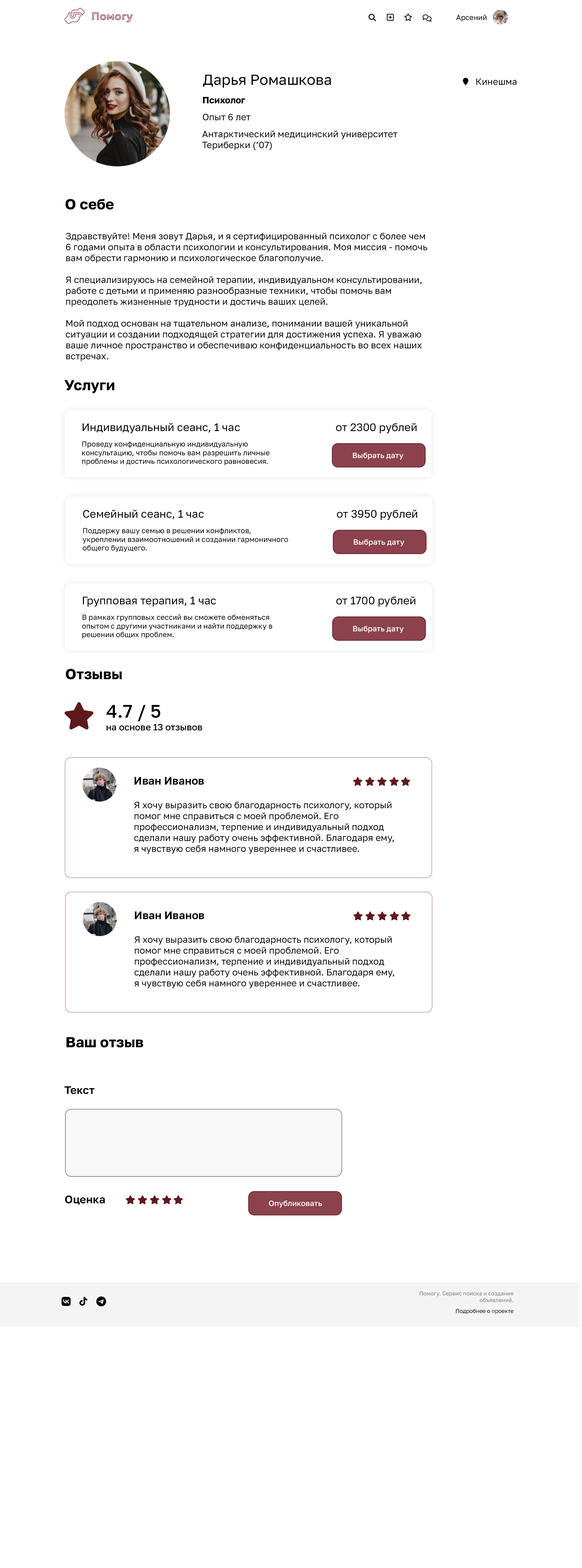
<style>
.page{position:relative;width:582px;height:1568px;background:#ffffff}
.page>*{position:absolute;margin:0}
.t1{font:10.9px "Geologica-Bold"}
.t2{font:7.3px "GolosText-Regular";color:#000000}
.t3{font:14.5px "GolosText-Regular";color:#000000}
.t4{font:9.1px "GolosText-Regular";color:#000000}
.t5{font:9.1px "GolosText-Bold";color:#000000}
.t6{font:14.5px "GolosText-Bold";color:#000000}
.t7{font:10.9px "GolosText-Regular";color:#000000}
.t8{font:7.6px "GolosText-Medium";color:#ffffff}
.t9{font:18.2px "GolosText-Medium";color:#000000}
.t10{font:9.1px "GolosText-Medium";color:#000000}
.t11{font:10.9px "GolosText-SemiBold";color:#000000}
.t12{font:5.5px "GolosText-Regular";color:#7c7c7c}
.t13{font:5.5px "GolosText-Regular";color:#000000}
</style>
<div class="page">
<p class="t1" style="left:92px;top:12px;width:41px;height:11px">Помогу</p>
<p class="t2" style="left:456px;top:15px;width:30px;height:7px">Арсений</p>
<p class="t3" style="left:203px;top:75px;width:128px;height:13px">Дарья Ромашкова</p>
<p class="t4" style="left:476px;top:78px;width:40px;height:7px">Кинешма</p>
<p class="t5" style="left:203px;top:97px;width:42px;height:7px">Психолог</p>
<p class="t4" style="left:203px;top:114px;width:47px;height:7px">Опыт 6 лет</p>
<p class="t4" style="left:202px;top:131px;width:195px;height:19px">Антарктический медицинский университет<br>Териберки (’07)</p>
<p class="t6" style="left:65px;top:199px;width:49px;height:11px">О себе</p>
<p class="t4" style="left:66px;top:233px;width:361px;height:128px">Здравствуйте! Меня зовут Дарья, и я сертифицированный психолог с более чем 6 годами опыта в области психологии и консультирования. Моя миссия - помочь вам обрести гармонию и психологическое благополучие.<br><br>Я специализируюсь на семейной терапии, индивидуальном консультировании, работе с детьми и применяю разнообразные техники, чтобы помочь вам преодолеть жизненные трудности и достичь ваших целей.<br><br>Мой подход основан на тщательном анализе, понимании вашей уникальной ситуации и создании подходящей стратегии для достижения успеха. Я уважаю ваше личное пространство и обеспечиваю конфиденциальность во всех наших встречах.<br><br>С моей помощью вы сможете развиваться, решать проблемы и строить более счастливую жизнь. Я горжусь своей работой и готов вам помочь. Не стесняйтесь связаться со мной для записи на консультацию и начала пути к лучшей версии себя.</p>
<p class="t6" style="left:64px;top:380px;width:50px;height:14px">Услуги</p>
<p class="t7" style="left:82px;top:423px;width:158px;height:11px">Индивидуальный сеанс, 1 час</p>
<p class="t7" style="left:336px;top:423px;width:80px;height:11px">от 2300 рублей</p>
<p class="t2" style="left:82px;top:441px;width:187px;height:24px">Проведу конфиденциальную индивидуальную консультацию, чтобы помочь вам разрешить личные проблемы и достичь психологического равновесия.</p>
<p class="t8" style="left:353px;top:452px;width:50px;height:8px">Выбрать дату</p>
<p class="t7" style="left:83px;top:510px;width:121px;height:10px">Семейный сеанс, 1 час</p>
<p class="t7" style="left:337px;top:510px;width:80px;height:10px">от 3950 рублей</p>
<p class="t2" style="left:82px;top:528px;width:206px;height:24px">Поддержу вашу семью в решении конфликтов, укреплении взаимоотношений и создании гармоничного общего будущего.</p>
<p class="t8" style="left:354px;top:539px;width:50px;height:7px">Выбрать дату</p>
<p class="t7" style="left:83px;top:596px;width:133px;height:11px">Групповая терапия, 1 час</p>
<p class="t7" style="left:336px;top:596px;width:79px;height:11px">от 1700 рублей</p>
<p class="t2" style="left:82px;top:614px;width:190px;height:25px">В рамках групповых сессий вы сможете обменяться опытом с другими участниками и найти поддержку в решении общих проблем.</p>
<p class="t8" style="left:353px;top:626px;width:51px;height:7px">Выбрать дату</p>
<p class="t6" style="left:66px;top:669px;width:56px;height:10px">Отзывы</p>
<p class="t9" style="left:106px;top:705px;width:54px;height:16px">4.7 / 5</p>
<p class="t10" style="left:106px;top:724px;width:96px;height:7px">на основе 13 отзывов</p>
<p class="t11" style="left:135px;top:777px;width:69px;height:8px">Иван Иванов</p>
<p class="t4" style="left:134px;top:802px;width:260px;height:52px">Я хочу выразить свою благодарность психологу, который<br>помог мне справиться с моей проблемой. Его<br>профессионализм, терпение и индивидуальный подход<br>сделали нашу работу очень эффективной. Благодаря ему,<br>я чувствую себя намного увереннее и счастливее.</p>
<p class="t11" style="left:135px;top:911px;width:69px;height:8px">Иван Иванов</p>
<p class="t4" style="left:134px;top:936px;width:260px;height:52px">Я хочу выразить свою благодарность психологу, который<br>помог мне справиться с моей проблемой. Его<br>профессионализм, терпение и индивидуальный подход<br>сделали нашу работу очень эффективной. Благодаря ему,<br>я чувствую себя намного увереннее и счастливее.</p>
<p class="t6" style="left:66px;top:1037px;width:77px;height:11px">Ваш отзыв</p>
<p class="t11" style="left:64px;top:1086px;width:31px;height:8px">Текст</p>
<p class="t11" style="left:65px;top:1195px;width:40px;height:10px">Оценка</p>
<p class="t8" style="left:269px;top:1200px;width:53px;height:8px">Опубликовать</p>
<p class="t12" style="left:419px;top:1291px;width:94px;height:11px;text-align:right">Помогу. Сервис поиска и создания<br>объявлений.</p>
<p class="t13" style="left:456px;top:1309px;width:57px;height:5px">Подробнее о проекте</p>
</div>
